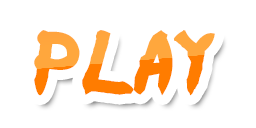
<style>
.page{position:relative;width:256px;height:128px;background:#ffffff}
.page>*{position:absolute;margin:0}
.t1{font:72px "Ninja-Naruto"}
</style>
<div class="page">
<p class="t1" style="left:34px;top:30px;width:181px;height:66px">play</p>
</div>
